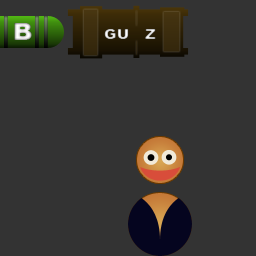
<style>
.page{position:relative;width:256px;height:256px;background:#333333}
.page>*{position:absolute;margin:0}
.t1{font:24px "Arial-Black";scale:1.1 1}
.t2{font:14px "Arial-Black";scale:1.1 1}
</style>
<div class="page">
<p class="t1" style="left:14px;top:23px;width:18px;height:17px">B</p>
<p class="t2" style="left:104px;top:29px;width:52px;height:10px">GU   Z</p>
</div>
